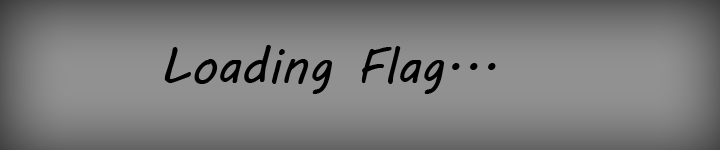
<style>
.page{position:relative;width:720px;height:150px}
.page>*{position:absolute;margin:0}
.t1{font:50px "MVBoli";color:#000001}
</style>
<div class="page">
<p class="t1" style="left:164px;top:45px;width:332px;height:49px">Loading Flag...</p>
</div>
